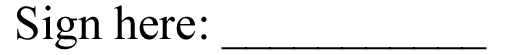
<style>
.page{position:relative;width:512px;height:55px;background:#ffffff}
.page>*{position:absolute;margin:0}
.t1{font:48px "TimesNewRomanPSMT";color:#000000}
</style>
<div class="page">
<p class="t1" style="left:17px;top:5px;width:470px;height:45px">Sign here: ___________</p>
</div>
